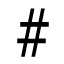
<style>
.page{position:relative;width:64px;height:64px;background:#ffffff}
.page>*{position:absolute;margin:0}
.t1{font:66.1px "Tahoma";color:#000000;scale:0.8 1}
</style>
<div class="page">
<p class="t1" style="left:17px;top:8px;width:32px;height:49px">#</p>
</div>
